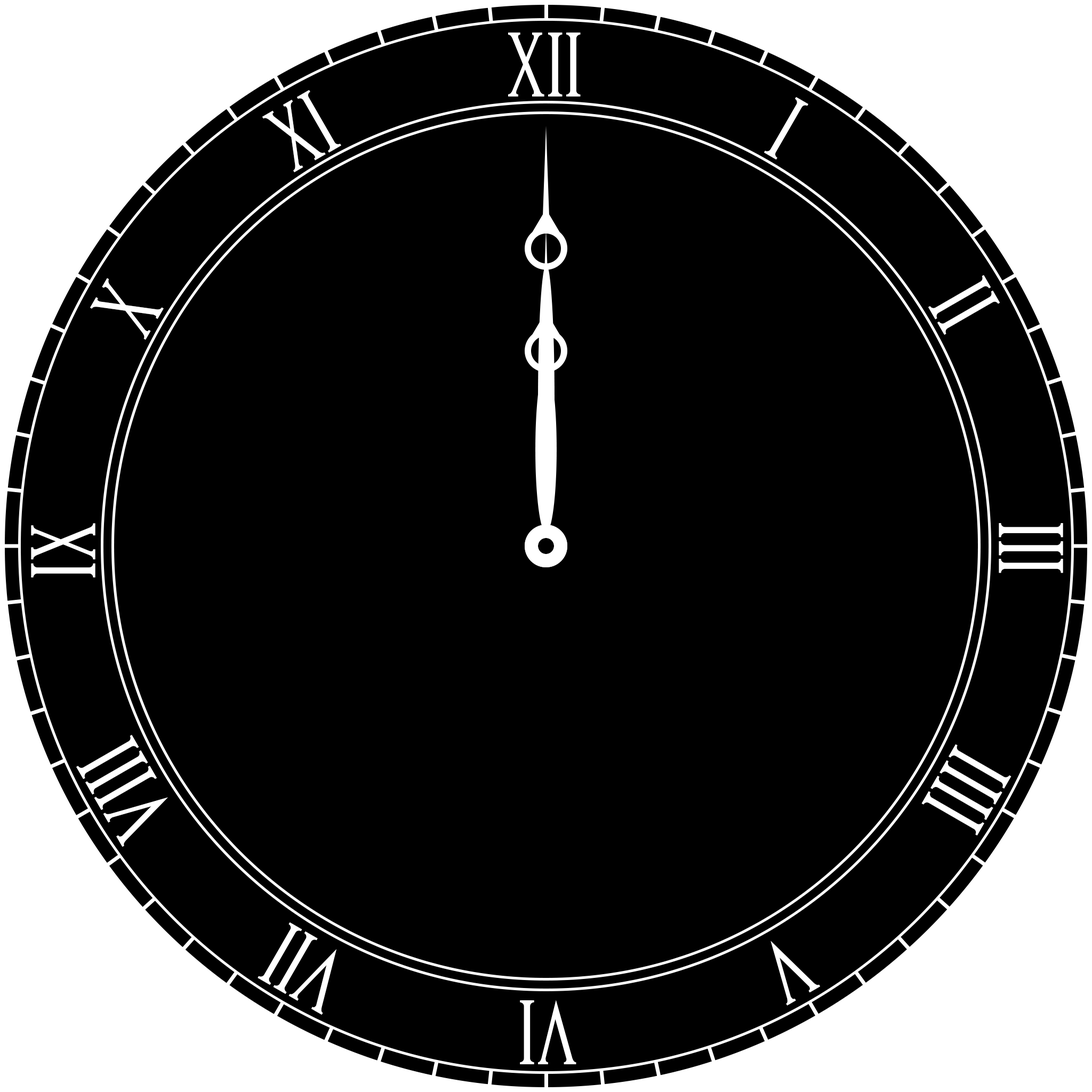
<style>
.page{position:relative;width:1092px;height:1092px;background:#000000}
.page>*{position:absolute;margin:0}
.t1{font:80px "RomanFont7";color:#ffffff}
</style>
<div class="page">
<p class="t1" style="left:508px;top:33px;width:73px;height:64px">XII</p>
<p class="t1" style="left:262px;top:90px;width:79px;height:82px;rotate:-30deg">XI</p>
<p class="t1" style="left:764px;top:97px;width:44px;height:63px;rotate:30deg">I</p>
<p class="t1" style="left:90px;top:278px;width:74px;height:62px;rotate:-60deg">X</p>
<p class="t1" style="left:928px;top:275px;width:72px;height:60px;rotate:60deg">II</p>
<p class="t1" style="left:31px;top:523px;width:64px;height:54px;rotate:-90deg">IX</p>
<p class="t1" style="left:999px;top:523px;width:64px;height:50px;rotate:90deg">III</p>
<p class="t1" style="left:76px;top:735px;width:92px;height:112px;rotate:-120deg">VIII</p>
<p class="t1" style="left:921px;top:744px;width:90px;height:92px;rotate:120deg">IIII</p>
<p class="t1" style="left:258px;top:922px;width:78px;height:93px;rotate:-150deg">VII</p>
<p class="t1" style="left:770px;top:941px;width:51px;height:65px;rotate:150deg">V</p>
<p class="t1" style="left:520px;top:1000px;width:56px;height:64px;rotate:180deg">VI</p>
</div>
